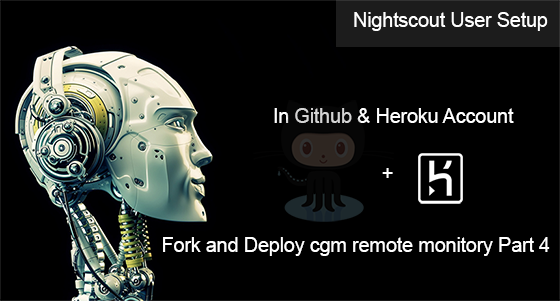
<style>
.page{position:relative;width:560px;height:301px;background:#000000}
.page>*{position:absolute;margin:0}
.t1{font:20.4px "ArialMT";letter-spacing:-0.021em;color:#ffffff}
</style>
<div class="page">
<p class="t1" style="left:354px;top:12px;width:194px;height:19px">Nightscout User Setup</p>
<p class="t1" style="left:274px;top:108px;width:240px;height:15px">In Github &amp; Heroku Account</p>
<p class="t1" style="left:382px;top:168px;width:11px;height:10px">+</p>
<p class="t1" style="left:163px;top:237px;width:387px;height:19px">Fork and Deploy cgm remote monitory Part 4</p>
</div>
